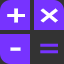
<style>
.page{position:relative;width:64px;height:64px;background:#7733ff}
.page>*{position:absolute;margin:0}
.t1{font:29.7px "NirmalaUI-Bold";color:#ffffff;scale:1.25 1}
.t2{font:29.7px "NirmalaUI-Bold";color:#7733ff;scale:1.25 1}
</style>
<div class="page">
<p class="t1" style="left:7px;top:8px;width:18px;height:15px">+</p>
<p class="t1" style="left:40px;top:8px;width:18px;height:15px">×x</p>
<p class="t1" style="left:10px;top:47px;width:11px;height:4px">-</p>
<p class="t2" style="left:40px;top:43px;width:18px;height:11px">=</p>
</div>
